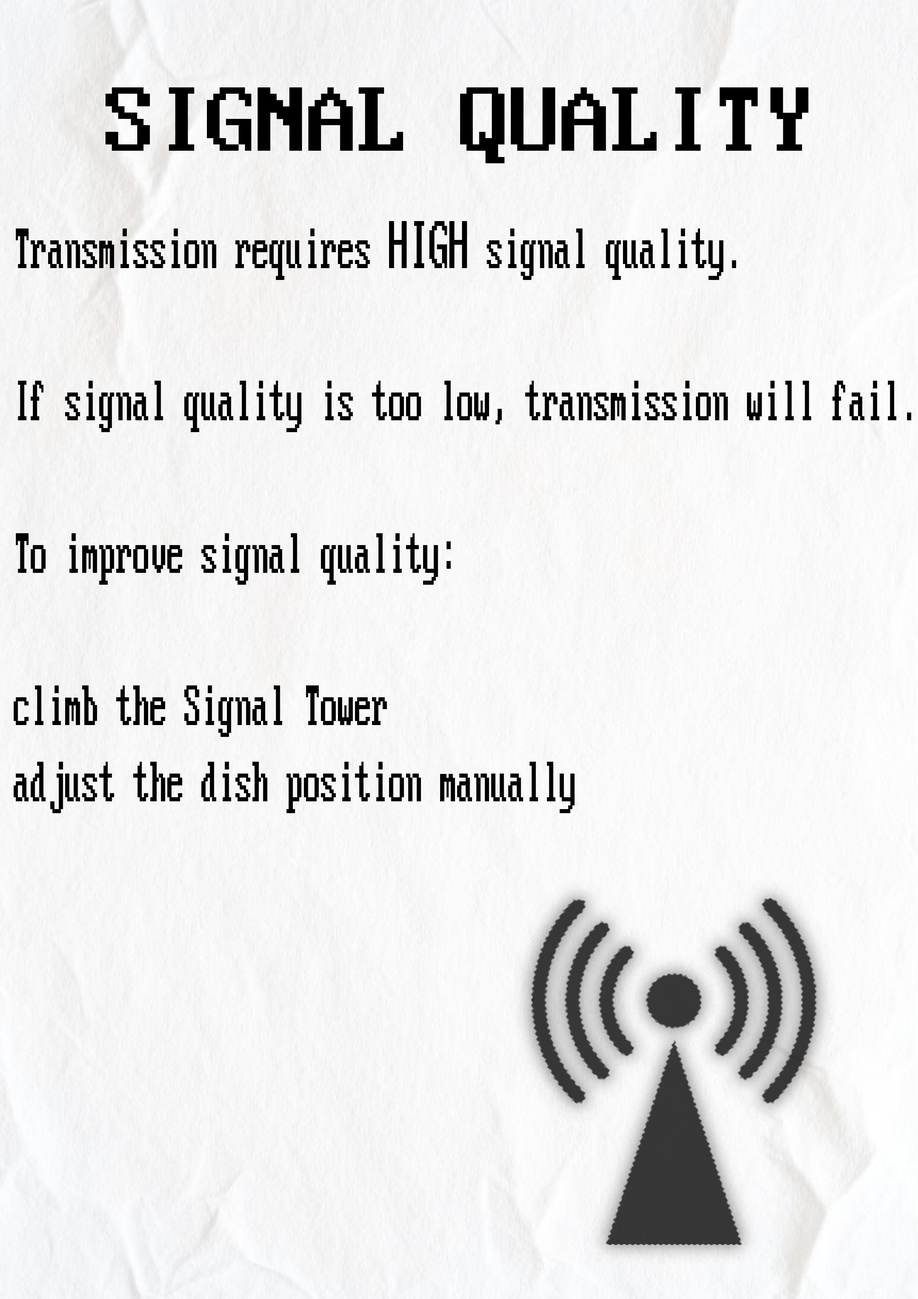
<style>
.page{position:relative;width:918px;height:1299px}
.page>*{position:absolute;margin:0}
.t1{font:101.3px "PxPlus_IBM_VGA_8x16";color:#000000}
.t2{font:63.5px "PxPlus_IBM_VGA_8x16";color:#000000;scale:0.54 1}
.t3{font:75px "PxPlus_IBM_VGA_8x16";color:#000000;scale:0.54 1}
</style>
<div class="page">
<p class="t1" style="left:106px;top:87px;width:703px;height:76px">SIGNAL QUALITY</p>
<p class="t2" style="left:14px;top:221px;width:897px;height:592px">Transmission requires <span class="t3">HIGH</span> signal quality.<br><br>If signal quality is too low, transmission will fail.<br><br>To improve signal quality:<br><br>climb the Signal Tower<br>adjust the dish position manually</p>
</div>
